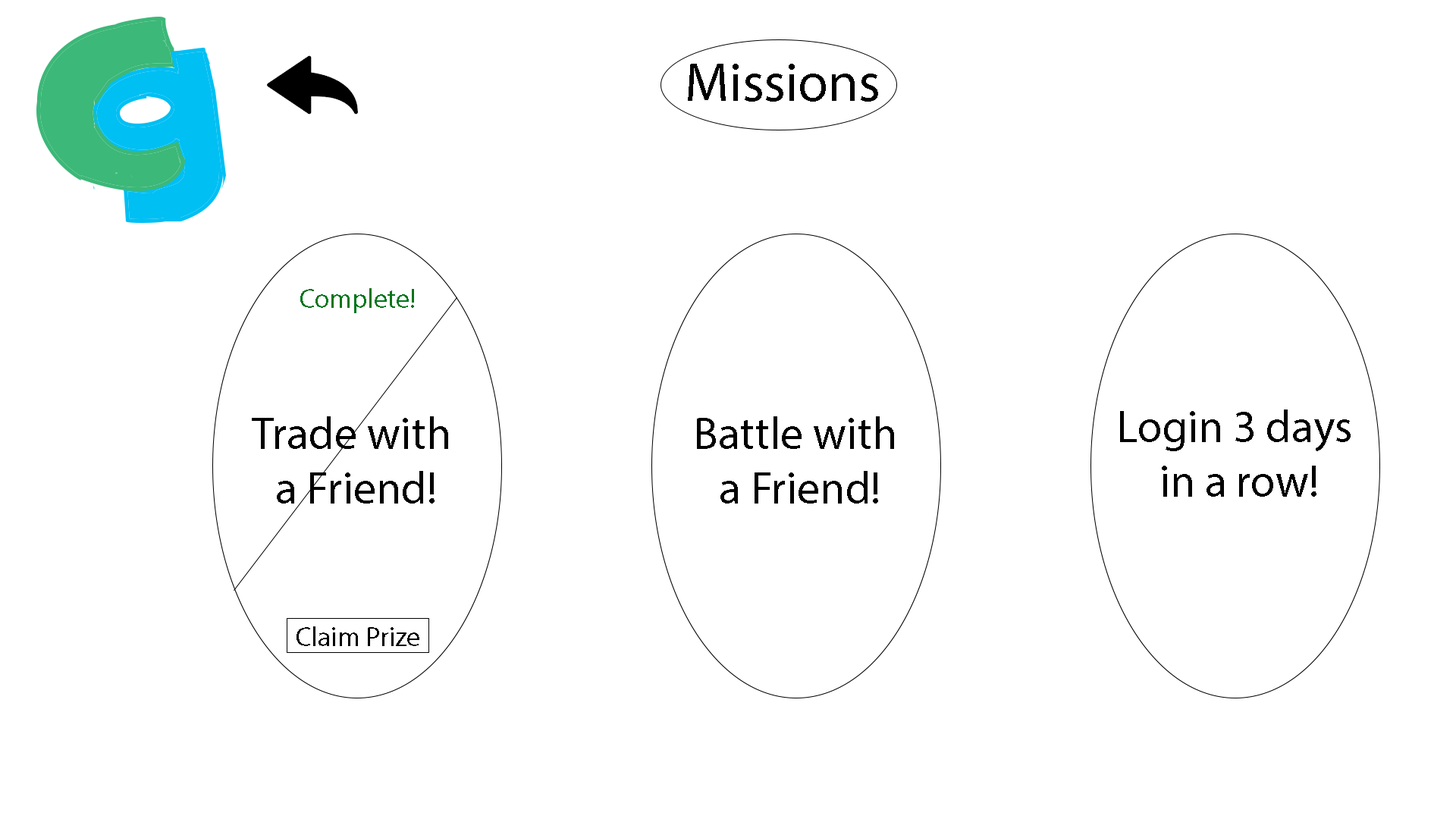
<style>
.page{position:relative;width:1456px;height:819px;background:#ffffff}
.page>*{position:absolute;margin:0}
.t1{font:54.6px "MyriadPro-Regular";color:#000000}
.t2{font:27.3px "MyriadPro-Regular";color:#00761c}
.t3{font:45.5px "MyriadPro-Regular";color:#000000}
.t4{font:27.3px "MyriadPro-Regular";color:#000000}
</style>
<div class="page">
<p class="t1" style="left:688px;top:64px;width:190px;height:38px">Missions</p>
<p class="t2" style="left:300px;top:288px;width:114px;height:25px">Complete!</p>
<p class="t3" style="left:1120px;top:409px;width:231px;height:88px;text-align:center">Login 3 days<br> in a row!</p>
<p class="t3" style="left:252px;top:416px;width:196px;height:88px;text-align:center">Trade with<br> a Friend!</p>
<p class="t3" style="left:697px;top:416px;width:197px;height:88px;text-align:center">Battle with<br> a Friend!</p>
<p class="t4" style="left:297px;top:626px;width:122px;height:20px">Claim Prize</p>
</div>
